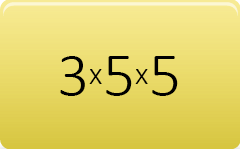
<style>
.page{position:relative;width:240px;height:149px}
.page>*{position:absolute;margin:0}
.t1{font:64px "Calibri-Light";color:#000000}
.t2{font:32px "Calibri-Light";color:#000000}
</style>
<div class="page">
<p class="t1" style="left:60px;top:56px;width:118px;height:40px">3<span class="t2">x</span>5<span class="t2">x</span>5</p>
</div>
